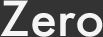
<style>
.page{position:relative;width:103px;height:37px;background:#333333}
.page>*{position:absolute;margin:0}
.t1{font:47px "Futura-Medium";color:#ffffff;scale:1.05 1}
</style>
<div class="page">
<p class="t1" style="left:0px;top:0px;width:103px;height:37px;opacity:0.95">Zero</p>
</div>
